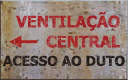
<style>
.page{position:relative;width:128px;height:80px}
.page>*{position:absolute;margin:0}
.t1{font:15.9px/20px "Tahoma-Bold";color:#ad1f29;text-transform:uppercase}
.t2{font:13.5px "Tahoma-Bold";color:#211818;text-transform:uppercase}
</style>
<div class="page">
<p class="t1" style="left:16px;top:11px;width:104px;height:37px;text-align:right">VENTILAÇÃO<br>CENTRAL</p>
<p class="t2" style="left:3px;top:55px;width:122px;height:11px">ACESSO AO DUTO</p>
</div>
